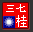
<style>
.page{position:relative;width:33px;height:32px;background:#f20000}
.page>*{position:absolute;margin:0}
.t1{font:10.4px "SimSun";color:#ffffff}
.t2{font:11.7px "SimSun";color:#ffffff}
</style>
<div class="page">
<p class="t1" style="left:6px;top:4px;width:20px;height:8px">三七</p>
<p class="t2" style="left:16px;top:15px;width:11px;height:12px">桂</p>
</div>
